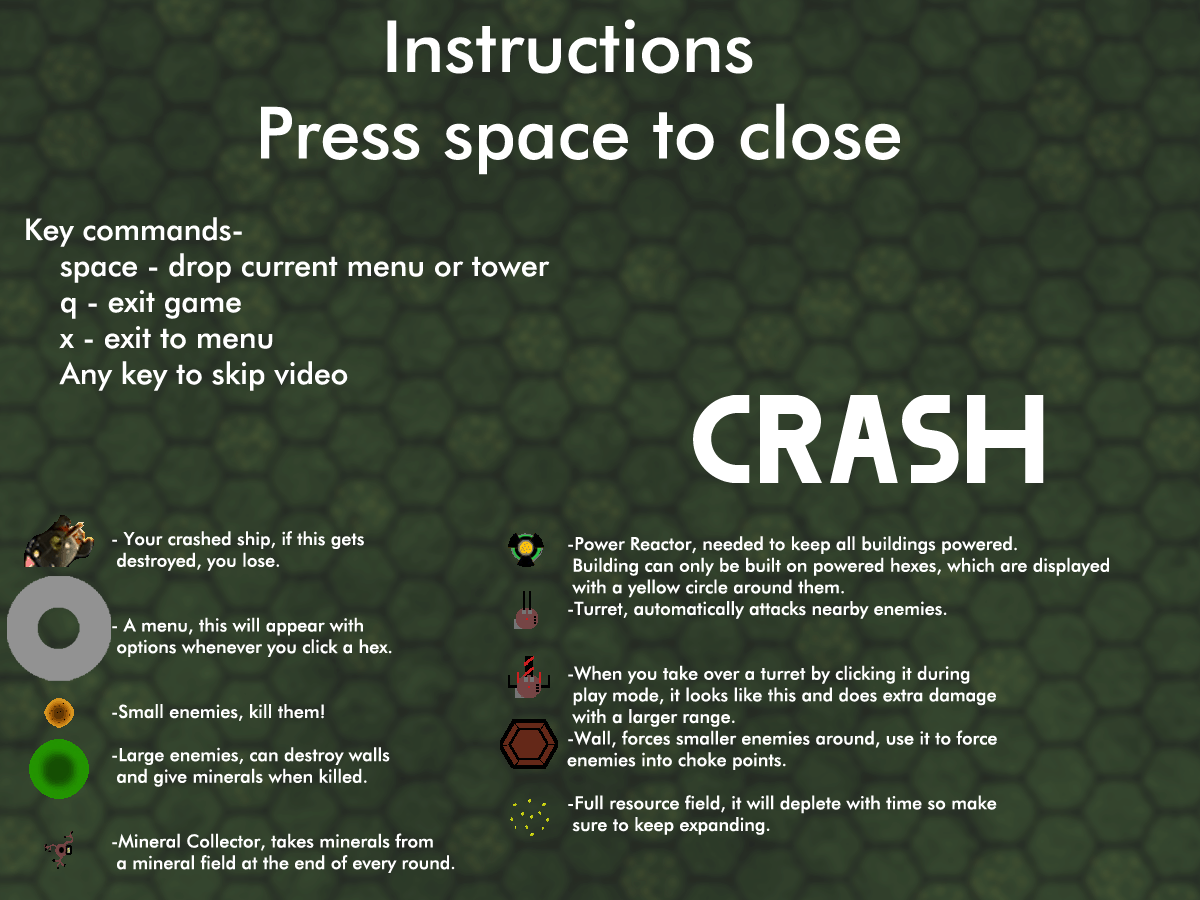
<style>
.page{position:relative;width:1200px;height:900px}
.page>*{position:absolute;margin:0}
.t1{font:72px "FuturaBT-Medium";color:#ffffff}
.t2{font:30px "FuturaBT-Medium";color:#ffffff}
.t3{font:18px "FuturaBT-Medium";color:#ffffff}
</style>
<div class="page">
<p class="t1" style="left:261px;top:19px;width:639px;height:156px;text-align:center">Instructions <br>Press space to close</p>
<p class="t2" style="left:26px;top:217px;width:524px;height:174px">Key commands-<br> space - drop current menu or tower<br> q - exit game<br> x - exit to menu<br> Any key to skip video</p>
<p class="t3" style="left:112px;top:531px;width:343px;height:342px">- Your crashed ship, if this gets <br> destroyed, you lose.<br><br><br>- A menu, this will appear with<br> options whenever you click a hex.<br><br><br>-Small enemies, kill them!<br><br>-Large enemies, can destroy walls<br> and give minerals when killed.<br><br><br>-Mineral Collector, takes minerals from<br> a mineral field at the end of every round.</p>
<p class="t3" style="left:567px;top:536px;width:542px;height:299px">-Power Reactor, needed to keep all buildings powered.<br> Building can only be built on powered hexes, which are displayed<br> with a yellow circle around them. <br>-Turret, automatically attacks nearby enemies.<br><br><br>-When you take over a turret by clicking it during<br> play mode, it looks like this and does extra damage<br> with a larger range.<br>-Wall, forces smaller enemies around, use it to force<br>enemies into choke points.<br><br>-Full resource field, it will deplete with time so make <br> sure to keep expanding.</p>
</div>
